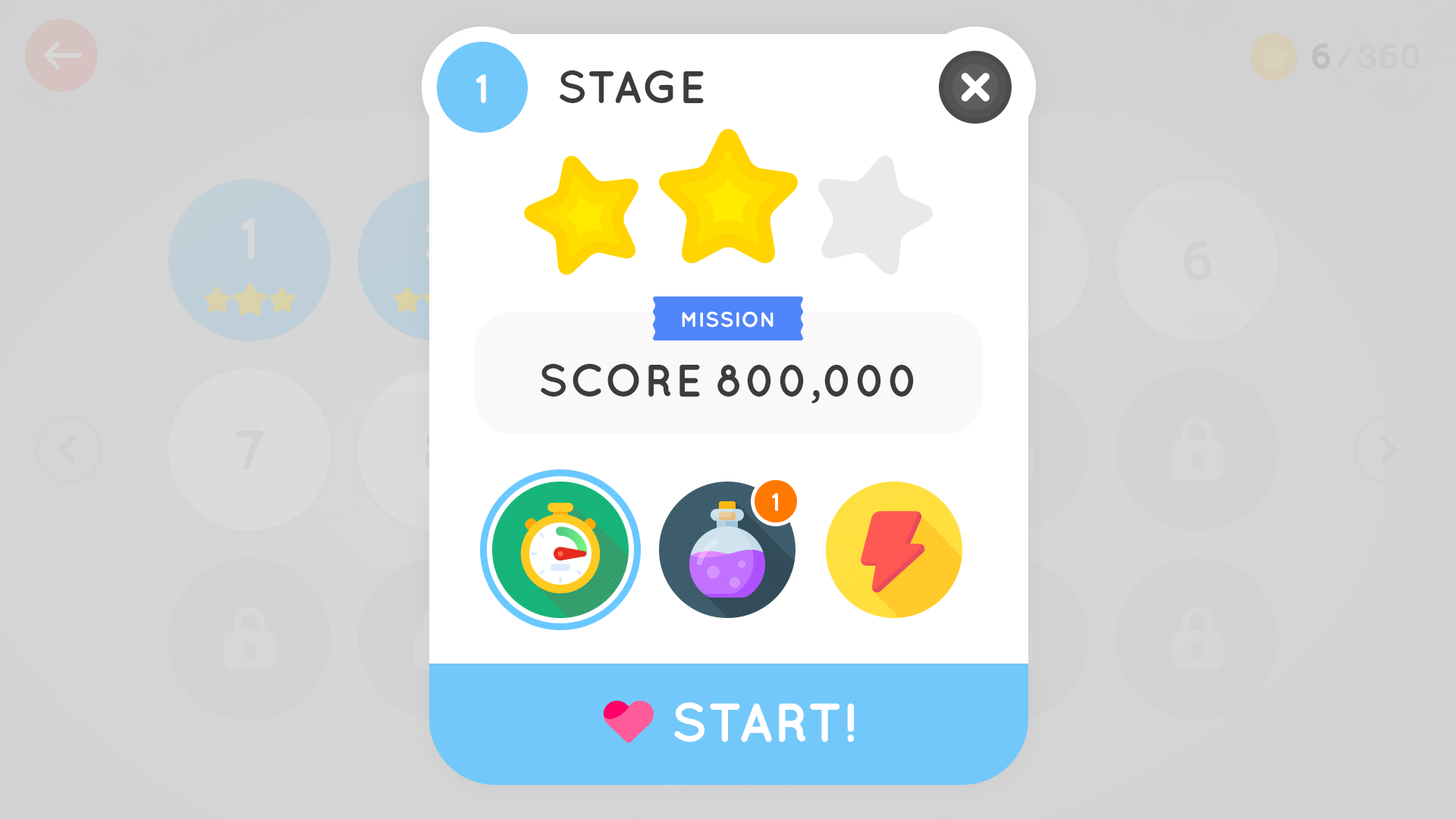
<style>
.page{position:relative;width:1456px;height:819px}
.page>*{position:absolute;margin:0}
.t1{font:48.5px "YanoljaYacheOTFB";color:#ffffff;text-transform:uppercase}
.t2{font:45.5px "Quicksand-Bold";color:#3c3c3c;text-transform:uppercase}
.t3{font:21.2px "Quicksand-Bold";color:#ffffff;text-transform:uppercase}
.t4{font:30.3px "YanoljaYacheOTFB";letter-spacing:0.02em;color:#ffffff;text-transform:uppercase}
.t5{font:54.6px "Quicksand-Bold";color:#ffffff;text-transform:uppercase}
</style>
<div class="page">
<p class="t1" style="left:476px;top:74px;width:10px;height:29px">1</p>
<p class="t2" style="left:560px;top:70px;width:144px;height:33px">Stage</p>
<p class="t3" style="left:682px;top:312px;width:91px;height:16px">MISSION</p>
<p class="t2" style="left:541px;top:363px;width:373px;height:40px">Score 800,000</p>
<p class="t4" style="left:772px;top:493px;width:6px;height:18px">1</p>
<p class="t5" style="left:674px;top:702px;width:180px;height:40px">Start!</p>
</div>
